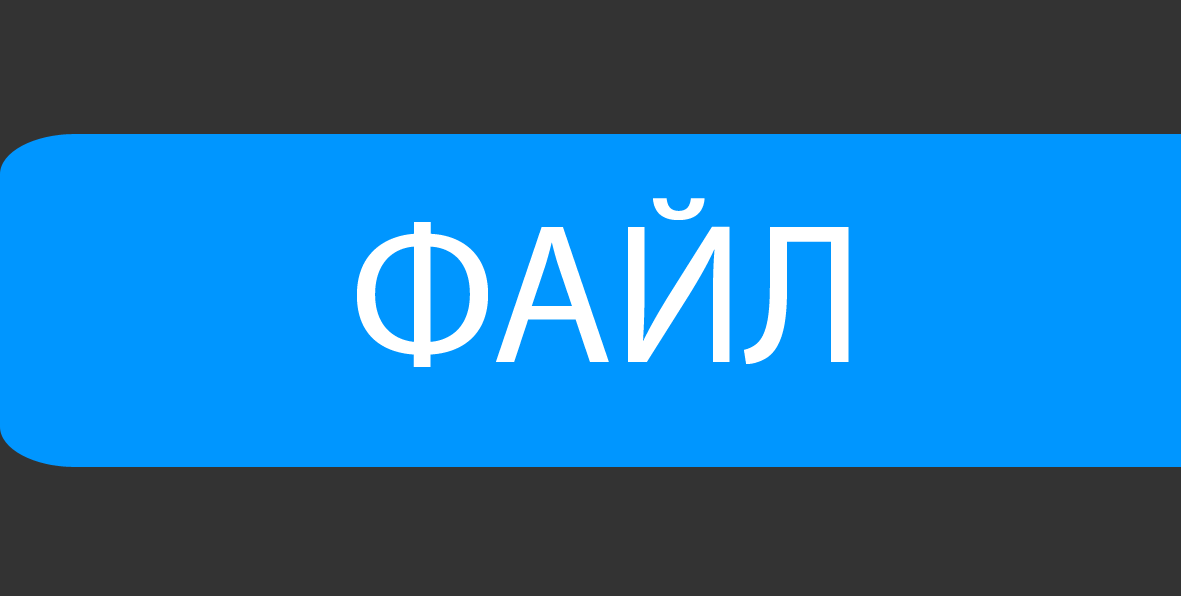
<style>
.page{position:relative;width:1181px;height:596px;background:#0096ff}
.page>*{position:absolute;margin:0}
.t1{font:200px "MyriadPro-Regular";color:#ffffff}
</style>
<div class="page">
<p class="t1" style="left:357px;top:198px;width:492px;height:169px">ФАЙЛ</p>
</div>
